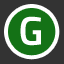
<style>
.page{position:relative;width:64px;height:64px;background:#333333}
.page>*{position:absolute;margin:0}
.t1{font:40px "TitilliumWeb-SemiBold";color:#ffffff}
</style>
<div class="page">
<p class="t1" style="left:20px;top:16px;width:21px;height:30px">G</p>
</div>
